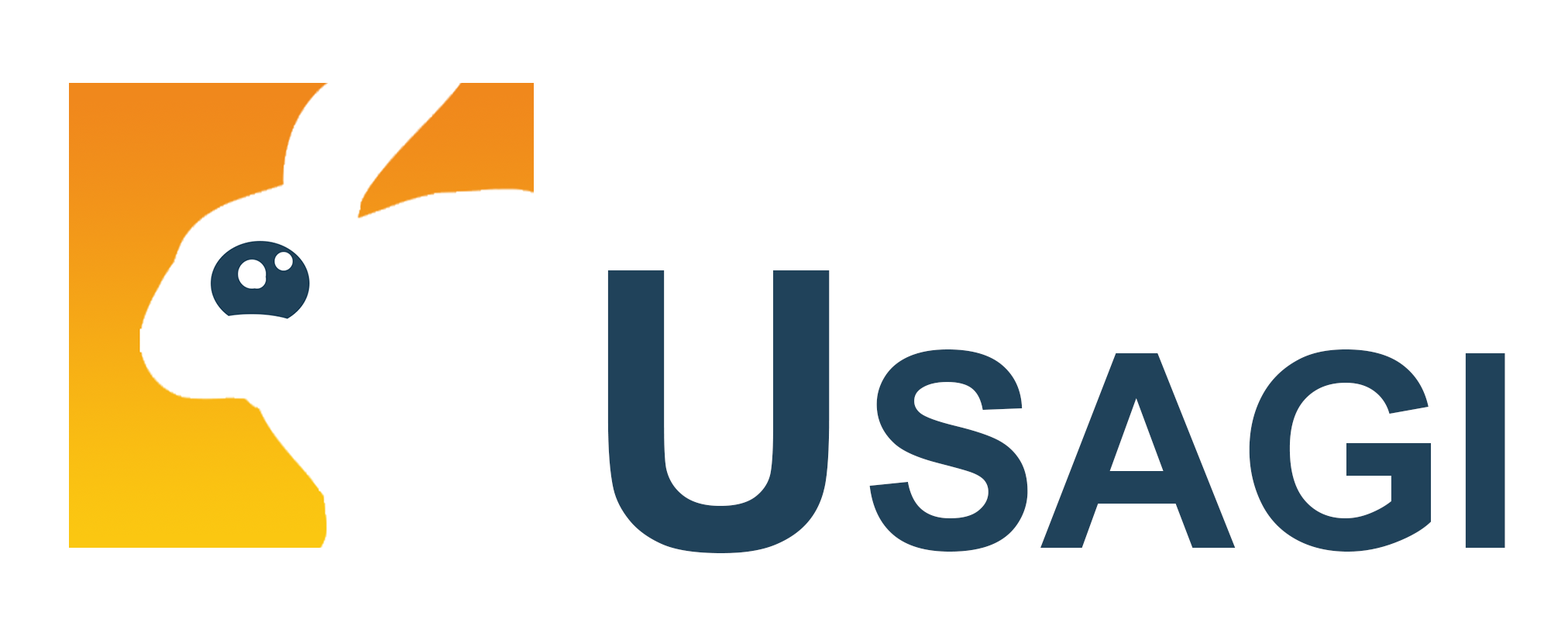
<style>
.page{position:relative;width:1568px;height:626px;background:#ffffff}
.page>*{position:absolute;margin:0}
.t1{font:387.4px "Arial-BoldMT";color:#20425a;font-variant:small-caps}
</style>
<div class="page">
<p class="t1" style="left:607px;top:270px;width:898px;height:283px">Usagi</p>
</div>
